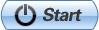
<style>
.page{position:relative;width:99px;height:30px}
.page>*{position:absolute;margin:0}
.t1{font:18px "JZhongYi";letter-spacing:-0.05em;color:#393633;font-style:italic}
</style>
<div class="page">
<p class="t1" style="left:43px;top:7px;width:39px;height:15px">Start</p>
</div>
